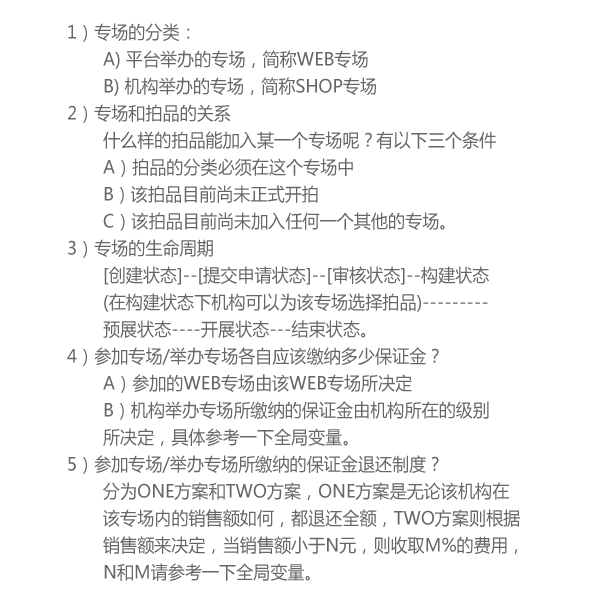
<style>
.page{position:relative;width:600px;height:600px;background:#ffffff}
.page>*{position:absolute;margin:0}
.t1{font:18px/27px "MicrosoftYaHei";color:#666666;scale:0.95 1}
</style>
<div class="page">
<p class="t1" style="left:67px;top:23px;width:453px;height:558px">1）专场的分类：<br> A) 平台举办的专场，简称WEB专场<br> B) 机构举办的专场，简称SHOP专场<br>2）专场和拍品的关系<br> 什么样的拍品能加入某一个专场呢？有以下三个条件<br> A）拍品的分类必须在这个专场中<br> B）该拍品目前尚未正式开拍<br> C）该拍品目前尚未加入任何一个其他的专场。<br>3）专场的生命周期<br> [创建状态]--[提交申请状态]--[审核状态]--构建状态<br> (在构建状态下机构可以为该专场选择拍品)---------<br> 预展状态----开展状态---结束状态。<br>4）参加专场/举办专场各自应该缴纳多少保证金？<br> A）参加的WEB专场由该WEB专场所决定<br> B）机构举办专场所缴纳的保证金由机构所在的级别<br> 所决定，具体参考一下全局变量。<br>5）参加专场/举办专场所缴纳的保证金退还制度？<br> 分为ONE方案和TWO方案，ONE方案是无论该机构在<br> 该专场内的销售额如何，都退还全额，TWO方案则根据<br> 销售额来决定，当销售额小于N元，则收取M%的费用，<br> N和M请参考一下全局变量。</p>
</div>
